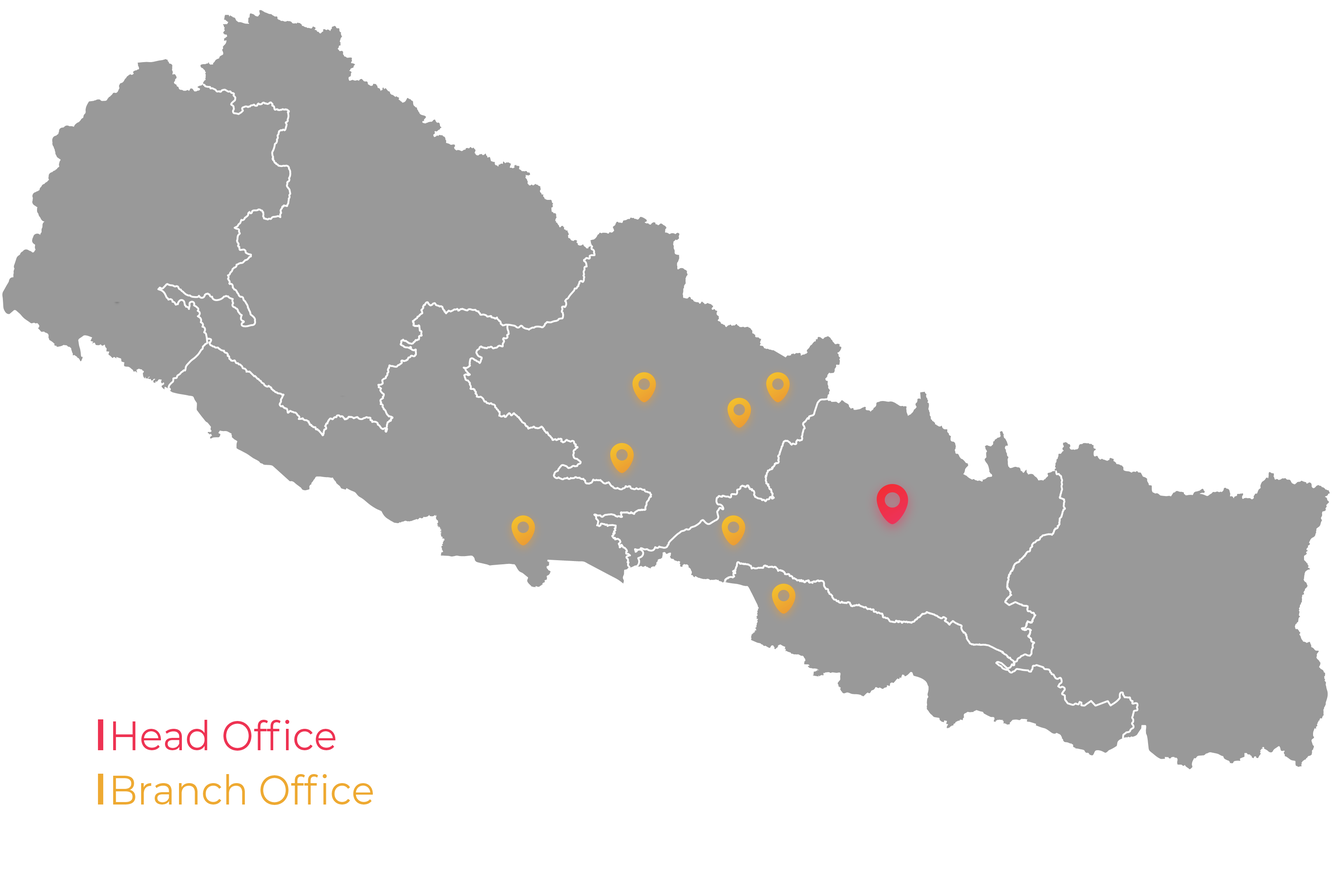
<style>
.page{position:relative;width:1332px;height:895px;background:#ffffff}
.page>*{position:absolute;margin:0}
.t1{font:41.1px "Montserrat-Regular";color:#ee3252;scale:0.93 1}
.t2{font:41.1px "Montserrat-Regular";color:#eea931;scale:0.93 1}
</style>
<div class="page">
<p class="t1" style="left:113px;top:720px;width:222px;height:31px">Head Office</p>
<p class="t2" style="left:113px;top:774px;width:260px;height:31px">Branch Office</p>
</div>
